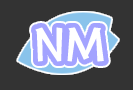
<style>
.page{position:relative;width:133px;height:90px;background:#333333}
.page>*{position:absolute;margin:0}
.t1{font:42px "RocknRollOne-Regular";color:#ffffff}
</style>
<div class="page">
<p class="t1" style="left:35px;top:27px;width:69px;height:35px">NM</p>
</div>
